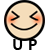
<style>
.page{position:relative;width:50px;height:50px;background:#ffffff}
.page>*{position:absolute;margin:0}
.t1{font:14.6px "MalgunGothicBold";color:#000000}
</style>
<div class="page">
<p class="t1" style="left:13px;top:39px;width:24px;height:11px">U P</p>
</div>
